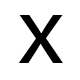
<style>
.page{position:relative;width:80px;height:80px;background:#ffffff}
.page>*{position:absolute;margin:0}
.t1{font:100px "MyriadPro-Regular";color:#000000}
</style>
<div class="page">
<p class="t1" style="left:18px;top:15px;width:45px;height:48px">x</p>
</div>
